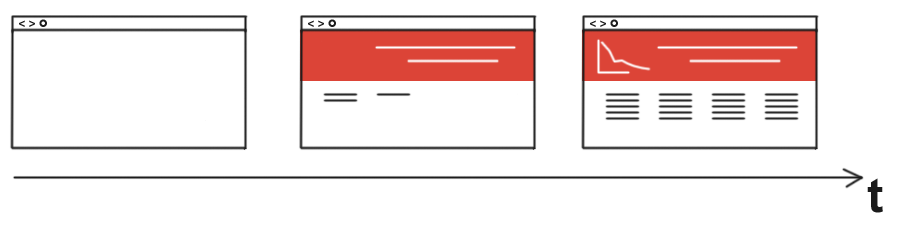
<style>
.page{position:relative;width:910px;height:229px;background:#ffffff}
.page>*{position:absolute;margin:0}
.t1{font:48px "Arial-BoldMT";color:#1b1b1b}
</style>
<div class="page">
<p class="t1" style="left:867px;top:178px;width:16px;height:35px">t</p>
</div>
